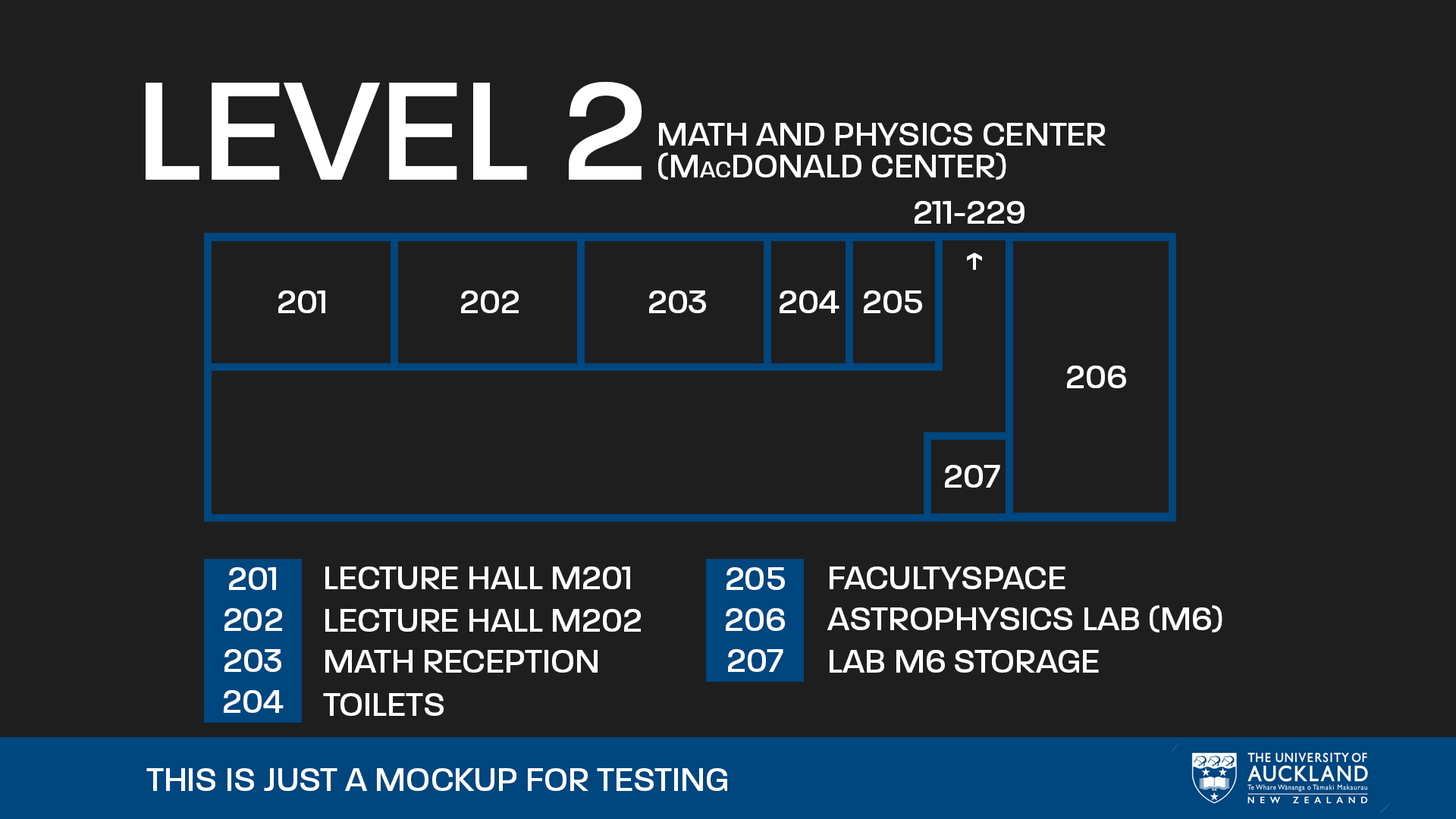
<style>
.page{position:relative;width:1456px;height:819px;background:#1e1e1e}
.page>*{position:absolute;margin:0}
.t1{font:151.7px "Paralucent-Medium";color:#ffffff}
.t2{font:34.9px/31.9px "Paralucent-Medium";color:#ffffff;font-variant:small-caps}
.t3{font:34.9px "Paralucent-Medium";color:#ffffff}
</style>
<div class="page">
<p class="t1" style="left:146px;top:82px;width:496px;height:98px">LEVEL 2</p>
<p class="t2" style="left:658px;top:123px;width:448px;height:57px">MATH AND PHYSICS CENTER<br>(MacDONALD CENTER)</p>
<p class="t3" style="left:915px;top:201px;width:109px;height:23px">211-229</p>
<p class="t3" style="left:967px;top:253px;width:15px;height:17px;rotate:-90deg">&gt;</p>
<p class="t3" style="left:278px;top:290px;width:47px;height:23px">201</p>
<p class="t3" style="left:461px;top:290px;width:58px;height:23px">202</p>
<p class="t3" style="left:649px;top:290px;width:57px;height:23px">203</p>
<p class="t3" style="left:780px;top:290px;width:59px;height:23px">204</p>
<p class="t3" style="left:864px;top:290px;width:58px;height:23px">205</p>
<p class="t3" style="left:1067px;top:366px;width:59px;height:22px">206</p>
<p class="t3" style="left:945px;top:465px;width:55px;height:23px">207</p>
<p class="t3" style="left:229px;top:567px;width:47px;height:23px">201</p>
<p class="t3" style="left:325px;top:566px;width:305px;height:23px">LECTURE HALL M201</p>
<p class="t3" style="left:726px;top:567px;width:59px;height:23px">205</p>
<p class="t3" style="left:830px;top:566px;width:235px;height:23px">FACULTYSPACE</p>
<p class="t3" style="left:827px;top:605px;width:395px;height:27px">ASTROPHYSICS LAB (M6)</p>
<p class="t3" style="left:224px;top:608px;width:58px;height:23px">202</p>
<p class="t3" style="left:325px;top:609px;width:316px;height:23px">LECTURE HALL M202</p>
<p class="t3" style="left:726px;top:608px;width:59px;height:23px">206</p>
<p class="t3" style="left:224px;top:649px;width:57px;height:23px">203</p>
<p class="t3" style="left:325px;top:650px;width:273px;height:23px">MATH RECEPTION</p>
<p class="t3" style="left:728px;top:649px;width:55px;height:23px">207</p>
<p class="t3" style="left:830px;top:650px;width:269px;height:23px">LAB M6 STORAGE</p>
<p class="t3" style="left:224px;top:690px;width:60px;height:23px">204</p>
<p class="t3" style="left:323px;top:693px;width:121px;height:23px">TOILETS</p>
<p class="t3" style="left:146px;top:768px;width:581px;height:23px">THIS IS JUST A MOCKUP FOR TESTING</p>
</div>
